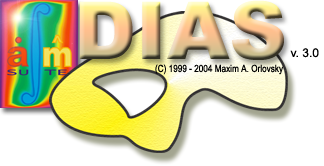
<style>
.page{position:relative;width:324px;height:166px;background:#ffffff}
.page>*{position:absolute;margin:0}
.t1{font:80px "Arial-Black"}
.t2{font:12px "ArialMT";color:#000000}
.t3{font:10px "ArialNarrow";color:#000000}
</style>
<div class="page">
<p class="t1" style="left:79px;top:0px;width:205px;height:60px">DIAS</p>
<p class="t2" style="left:291px;top:48px;width:28px;height:16px">v. 3.0</p>
<p class="t3" style="left:155px;top:65px;width:128px;height:14px">(C) 1999 - 2004 Maxim A. Orlovsky</p>
</div>
